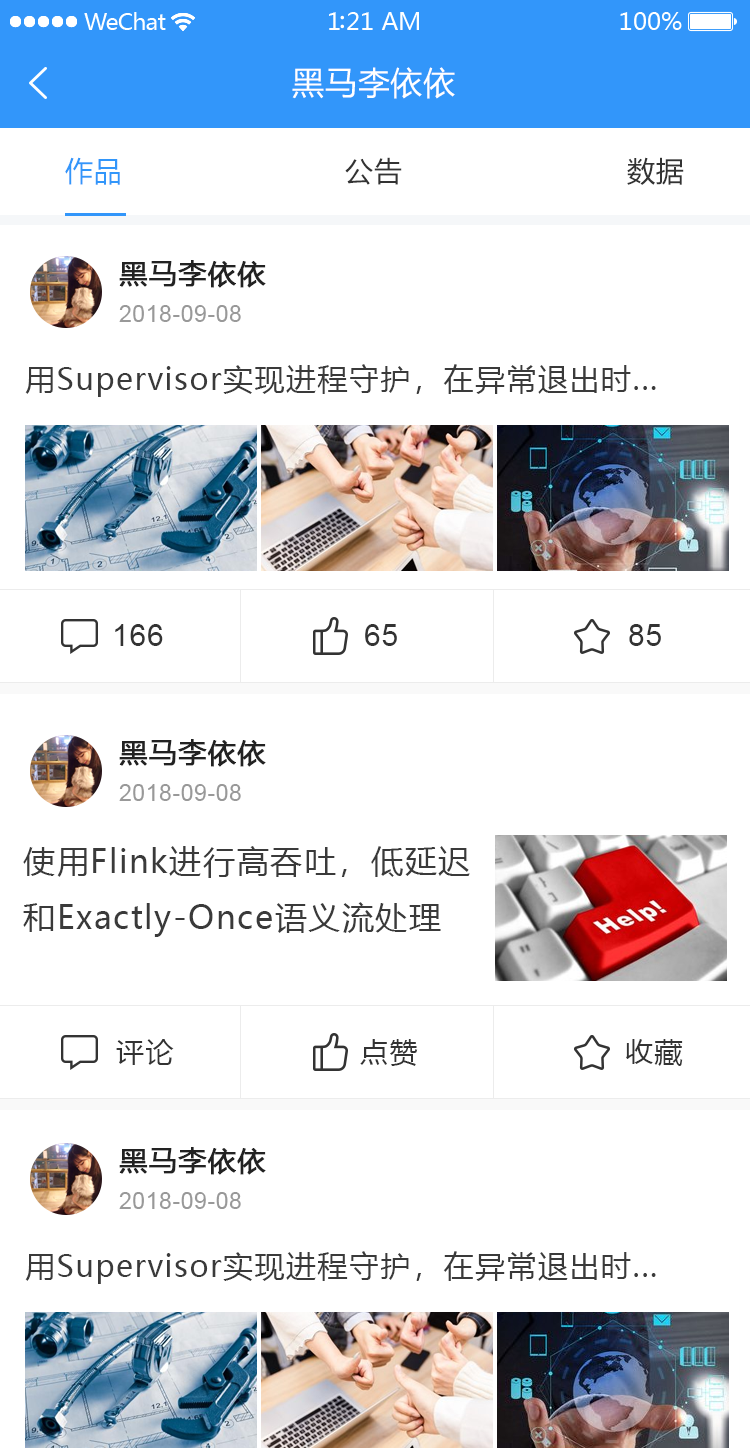
<style>
.page{position:relative;width:750px;height:1448px;background:#ffffff}
.page>*{position:absolute;margin:0}
.t1{font:32px "MicrosoftYaHei";letter-spacing:0.025em;color:#ffffff}
.t2{font:28px "MicrosoftYaHei";letter-spacing:0.025em;color:#3296fa}
.t3{font:28px "MicrosoftYaHei";letter-spacing:0.025em;color:#333333}
.t4{font:28px "MicrosoftYaHei";letter-spacing:0.025em;color:#222222;font-weight:bold}
.t5{font:23px "ArialMT";letter-spacing:0.025em;color:#999999}
.t6{font:30px "MicrosoftYaHei";letter-spacing:0.05em;color:#3a3a3a}
.t7{font:30px "ArialMT";letter-spacing:0.025em;color:#333333}
.t8{font:32px "MicrosoftYaHei";letter-spacing:0.05em;color:#3a3a3a}
.t9{font:28px "MicrosoftYaHei";letter-spacing:0.05em;color:#333333}
</style>
<div class="page">
<p class="t1" style="left:292px;top:67px;width:163px;height:32px">黑马李依依</p>
<p class="t2" style="left:65px;top:157px;width:55px;height:28px">作品</p>
<p class="t3" style="left:345px;top:157px;width:57px;height:28px">公告</p>
<p class="t3" style="left:627px;top:157px;width:57px;height:28px">数据</p>
<p class="t4" style="left:119px;top:260px;width:147px;height:28px">黑马李依依</p>
<p class="t5" style="left:119px;top:305px;width:122px;height:17px">2018-09-08</p>
<p class="t6" style="left:25px;top:364px;width:631px;height:33px">用Supervisor实现进程守护，在异常退出时...</p>
<p class="t7" style="left:115px;top:624px;width:48px;height:22px">166</p>
<p class="t7" style="left:365px;top:624px;width:32px;height:22px">65</p>
<p class="t7" style="left:629px;top:624px;width:32px;height:22px">85</p>
<p class="t4" style="left:119px;top:739px;width:147px;height:28px">黑马李依依</p>
<p class="t5" style="left:119px;top:784px;width:122px;height:17px">2018-09-08</p>
<p class="t8" style="left:23px;top:846px;width:447px;height:91px">使用Flink进行高吞吐，低延迟<br>和Exactly-Once语义流处理</p>
<p class="t9" style="left:116px;top:1039px;width:58px;height:26px">评论</p>
<p class="t9" style="left:360px;top:1039px;width:58px;height:27px">点赞</p>
<p class="t9" style="left:626px;top:1039px;width:57px;height:27px">收藏</p>
<p class="t4" style="left:119px;top:1147px;width:147px;height:28px">黑马李依依</p>
<p class="t5" style="left:119px;top:1192px;width:122px;height:17px">2018-09-08</p>
<p class="t6" style="left:25px;top:1251px;width:631px;height:33px">用Supervisor实现进程守护，在异常退出时...</p>
</div>
